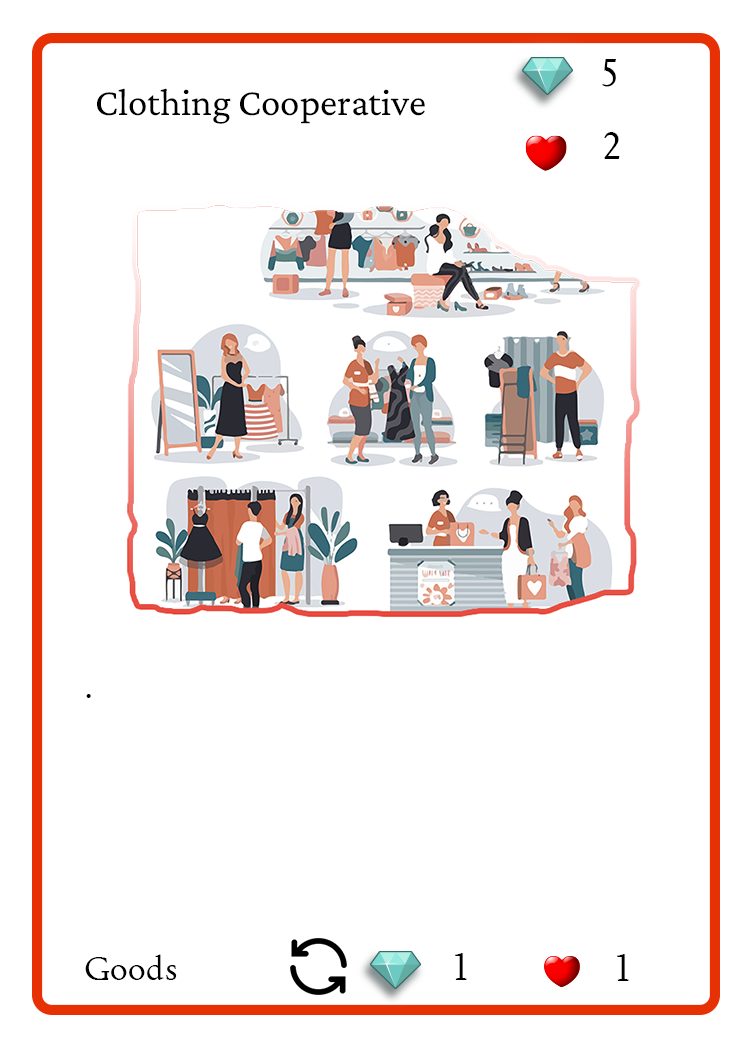
<style>
.page{position:relative;width:750px;height:1050px;background:#ffffff}
.page>*{position:absolute;margin:0}
.t1{font:37.5px "Joan-Regular";color:#000000;text-transform:uppercase}
.t2{font:38.9px "CrimsonPro-Regular";color:#000000}
.t3{font:33.3px "Joan-Regular";color:#000000}
</style>
<div class="page">
<p class="t1" style="left:602px;top:59px;width:14px;height:28px">5</p>
<p class="t2" style="left:97px;top:88px;width:328px;height:36px">Clothing Cooperative</p>
<p class="t1" style="left:604px;top:132px;width:16px;height:27px">2</p>
<p class="t3" style="left:86px;top:694px;width:5px;height:4px">.</p>
<p class="t1" style="left:455px;top:953px;width:12px;height:27px">1</p>
<p class="t3" style="left:85px;top:954px;width:92px;height:26px">Goods</p>
<p class="t1" style="left:617px;top:954px;width:12px;height:27px">1</p>
</div>
